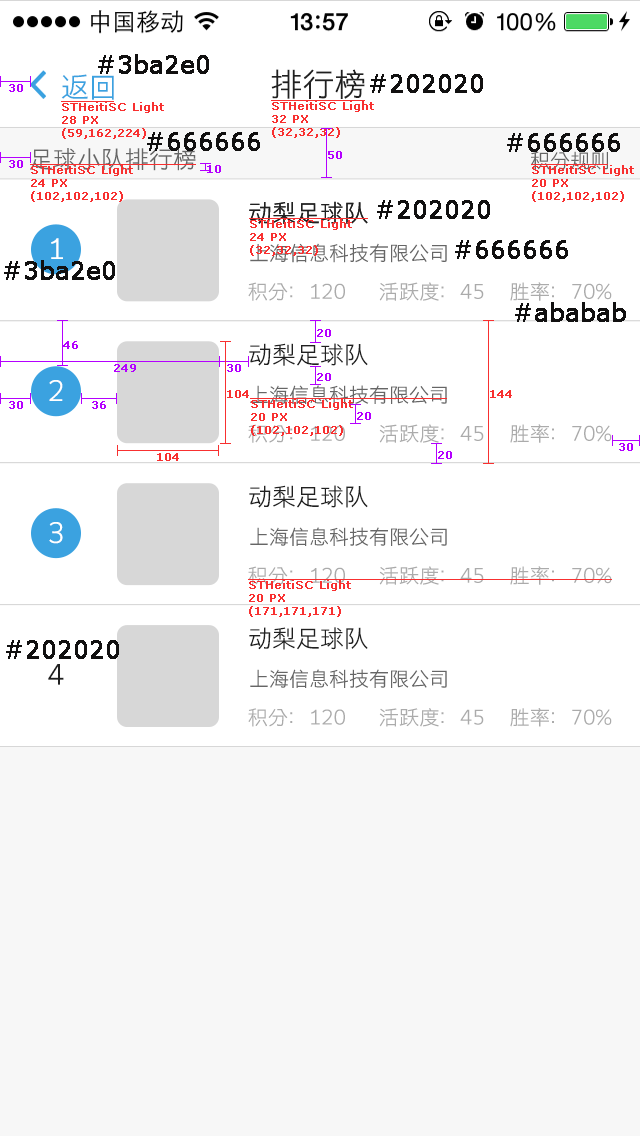
<style>
.page{position:relative;width:640px;height:1136px;background:#ffffff}
.page>*{position:absolute;margin:0}
.t1{font:24px "Verdana";color:#111010;font-weight:bold}
.t2{font:28px "STHeitiSC-Light";color:#3ba2e0}
.t3{font:32px "STHeitiSC-Light";color:#202020}
.t4{font:11px "Verdana";color:#b400ff;font-weight:bold}
.t5{font:11px "Verdana";color:#f83030;font-weight:bold}
.t6{font:24px "STHeitiSC-Light";color:#666666}
.t7{font:20px "STHeitiSC-Light";color:#666666}
.t8{font:24px "STHeitiSC-Light";color:#202020}
.t9{font:28px "STHeitiSC-Light";color:#ffffff}
.t10{font:20px "STHeitiSC-Light";color:#ababab}
.t11{font:28px "STHeitiSC-Light";color:#202020}
</style>
<div class="page">
<p class="t1" style="left:98px;top:54px;width:111px;height:20px">#3ba2e0</p>
<p class="t2" style="left:61px;top:74px;width:53px;height:26px">返回</p>
<p class="t3" style="left:271px;top:69px;width:94px;height:30px">排行榜</p>
<p class="t1" style="left:370px;top:74px;width:113px;height:19px">#202020</p>
<p class="t4" style="left:9px;top:84px;width:14px;height:8px">30</p>
<p class="t5" style="left:62px;top:102px;width:102px;height:37px">STHeitiSC Light<br>28 PX<br>(59,162,224)</p>
<p class="t5" style="left:272px;top:101px;width:102px;height:37px">STHeitiSC Light<br>32 PX<br>(32,32,32)</p>
<p class="t1" style="left:147px;top:132px;width:113px;height:19px">#666666</p>
<p class="t1" style="left:507px;top:133px;width:113px;height:19px">#666666</p>
<p class="t6" style="left:30px;top:148px;width:166px;height:23px">足球小队排行榜</p>
<p class="t4" style="left:9px;top:160px;width:14px;height:8px">30</p>
<p class="t4" style="left:328px;top:151px;width:14px;height:8px">50</p>
<p class="t7" style="left:531px;top:151px;width:77px;height:19px">积分规则</p>
<p class="t5" style="left:31px;top:165px;width:102px;height:37px">STHeitiSC Light<br>24 PX<br>(102,102,102)</p>
<p class="t4" style="left:207px;top:165px;width:14px;height:8px">10</p>
<p class="t5" style="left:532px;top:165px;width:102px;height:37px">STHeitiSC Light<br>20 PX<br>(102,102,102)</p>
<p class="t8" style="left:249px;top:201px;width:119px;height:23px">动梨足球队</p>
<p class="t8" style="left:249px;top:201px;width:119px;height:23px">动梨足球队</p>
<p class="t1" style="left:377px;top:200px;width:113px;height:19px">#202020</p>
<p class="t5" style="left:250px;top:219px;width:102px;height:37px">STHeitiSC Light<br>24 PX<br>(32,32,32)</p>
<p class="t9" style="left:51px;top:238px;width:12px;height:21px">1</p>
<p class="t7" style="left:250px;top:243px;width:197px;height:20px">上海信息科技有限公司</p>
<p class="t1" style="left:455px;top:240px;width:113px;height:19px">#666666</p>
<p class="t1" style="left:4px;top:260px;width:111px;height:20px">#3ba2e0</p>
<p class="t10" style="left:248px;top:282px;width:364px;height:19px">积分：120        活跃度：45      胜率：70%</p>
<p class="t1" style="left:515px;top:302px;width:111px;height:20px">#ababab</p>
<p class="t4" style="left:317px;top:329px;width:14px;height:8px">20</p>
<p class="t4" style="left:63px;top:341px;width:15px;height:8px">46</p>
<p class="t8" style="left:249px;top:343px;width:119px;height:23px">动梨足球队</p>
<p class="t4" style="left:114px;top:364px;width:22px;height:8px">249</p>
<p class="t4" style="left:227px;top:364px;width:14px;height:8px">30</p>
<p class="t4" style="left:317px;top:373px;width:14px;height:8px">20</p>
<p class="t9" style="left:49px;top:380px;width:14px;height:21px">2</p>
<p class="t5" style="left:227px;top:390px;width:22px;height:8px">104</p>
<p class="t7" style="left:250px;top:385px;width:197px;height:19px">上海信息科技有限公司</p>
<p class="t5" style="left:490px;top:390px;width:22px;height:8px">144</p>
<p class="t4" style="left:9px;top:401px;width:14px;height:8px">30</p>
<p class="t4" style="left:92px;top:401px;width:14px;height:8px">36</p>
<p class="t5" style="left:251px;top:399px;width:102px;height:37px">STHeitiSC Light<br>20 PX<br>(102,102,102)</p>
<p class="t4" style="left:357px;top:412px;width:14px;height:8px">20</p>
<p class="t10" style="left:248px;top:424px;width:364px;height:19px">积分：120        活跃度：45      胜率：70%</p>
<p class="t4" style="left:619px;top:443px;width:14px;height:8px">30</p>
<p class="t5" style="left:157px;top:453px;width:22px;height:8px">104</p>
<p class="t4" style="left:438px;top:451px;width:14px;height:8px">20</p>
<p class="t8" style="left:249px;top:485px;width:119px;height:23px">动梨足球队</p>
<p class="t9" style="left:49px;top:522px;width:14px;height:22px">3</p>
<p class="t7" style="left:250px;top:527px;width:197px;height:19px">上海信息科技有限公司</p>
<p class="t10" style="left:248px;top:566px;width:364px;height:19px">积分：120        活跃度：45      胜率：70%</p>
<p class="t5" style="left:249px;top:580px;width:102px;height:37px">STHeitiSC Light<br>20 PX<br>(171,171,171)</p>
<p class="t8" style="left:249px;top:627px;width:119px;height:23px">动梨足球队</p>
<p class="t1" style="left:6px;top:640px;width:113px;height:19px">#202020</p>
<p class="t11" style="left:48px;top:664px;width:16px;height:21px">4</p>
<p class="t7" style="left:250px;top:669px;width:197px;height:19px">上海信息科技有限公司</p>
<p class="t10" style="left:248px;top:708px;width:364px;height:19px">积分：120        活跃度：45      胜率：70%</p>
</div>
